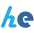
<style>
.page{position:relative;width:34px;height:33px;background:#ffffff}
.page>*{position:absolute;margin:0}
.t1{font:32px "HarlowSolid";letter-spacing:0.02em;color:#29aae1}
.t2{font:32px "Bauhaus93";letter-spacing:0.02em;color:#346699}
</style>
<div class="page">
<p class="t1" style="left:1px;top:6px;width:33px;height:22px">h<span class="t2">e</span></p>
</div>
